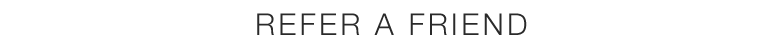
<style>
.page{position:relative;width:784px;height:47px;background:#ffffff}
.page>*{position:absolute;margin:0}
.t1{font:30px "HelveticaNeue-Light";letter-spacing:0.11em;color:#2a2a2a}
</style>
<div class="page">
<p class="t1" style="left:257px;top:13px;width:270px;height:22px">REFER A FRIEND</p>
</div>
